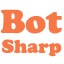
<style>
.page{position:relative;width:64px;height:64px;background:#ffffff}
.page>*{position:absolute;margin:0}
.t1{font:34.4px "CooperBlack";color:#f77847}
.t2{font:19.3px "CooperBlack";color:#f77847}
</style>
<div class="page">
<p class="t1" style="left:0px;top:9px;width:62px;height:25px">Bot</p>
<p class="t2" style="left:1px;top:39px;width:61px;height:18px">Sharp</p>
</div>
